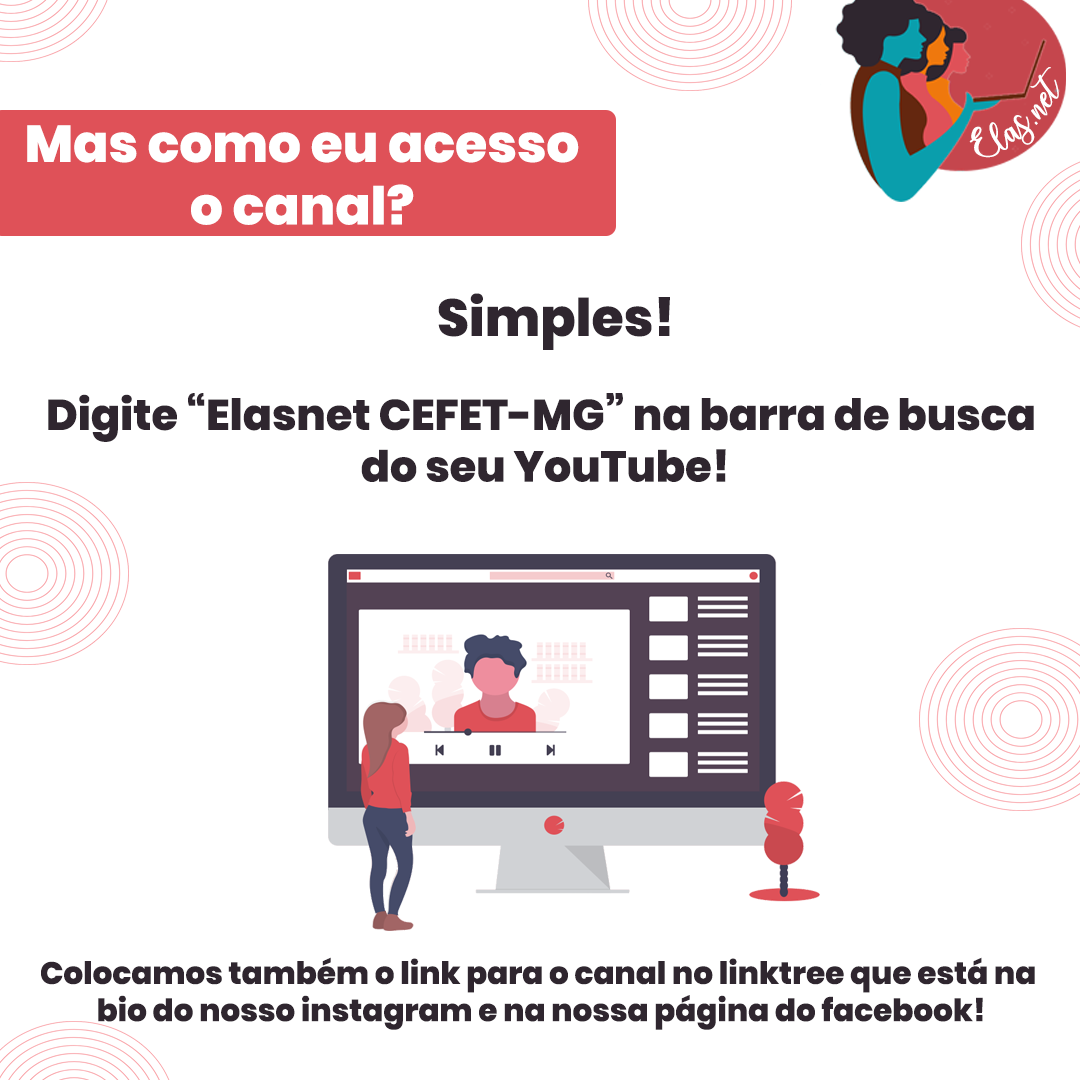
<style>
.page{position:relative;width:1080px;height:1080px;background:#ffffff}
.page>*{position:absolute;margin:0}
.t1{font:25.7px "charlinda-Regular";color:#ffffff;scale:1.18 1}
.t2{font:52px "Poppins-ExtraBold";color:#ffffff}
.t3{font:52px "Poppins-ExtraBold";color:#2f262f}
.t4{font:43px "Poppins-ExtraBold";color:#2f262f}
.t5{font:31px "Poppins-ExtraBold";color:#2f262f}
</style>
<div class="page">
<p class="t1" style="left:969px;top:67px;width:90px;height:91px;rotate:-43deg">Elas.net</p>
<p class="t2" style="left:27px;top:125px;width:552px;height:100px;text-align:center">Mas como eu acesso<br>o canal?</p>
<p class="t3" style="left:438px;top:293px;width:232px;height:57px">Simples!</p>
<p class="t4" style="left:48px;top:393px;width:986px;height:89px;text-align:center">Digite “Elasnet CEFET-MG” na barra de busca <br>do seu YouTube!</p>
<p class="t5" style="left:41px;top:957px;width:994px;height:73px;text-align:center">Colocamos também o link para o canal no linktree que está na <br>bio do nosso instagram e na nossa página do facebook!</p>
</div>
